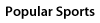
<style>
.page{position:relative;width:100px;height:23px;background:#ffffff}
.page>*{position:absolute;margin:0}
.t1{font:14px "MyriadPro-Semibold";color:#000000}
</style>
<div class="page">
<p class="t1" style="left:6px;top:6px;width:89px;height:13px">Popular Sports</p>
</div>
